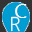
<style>
.page{position:relative;width:32px;height:32px;background:#009dd3}
.page>*{position:absolute;margin:0}
.t1{font:20px "SegoeUI";letter-spacing:0.01em;color:#ffffff}
.t2{font:20px "SegoeUI-Light";letter-spacing:0.01em;color:#ffffff}
</style>
<div class="page">
<p class="t1" style="left:15px;top:4px;width:12px;height:14px">C</p>
<p class="t2" style="left:11px;top:16px;width:9px;height:16px">R</p>
</div>
